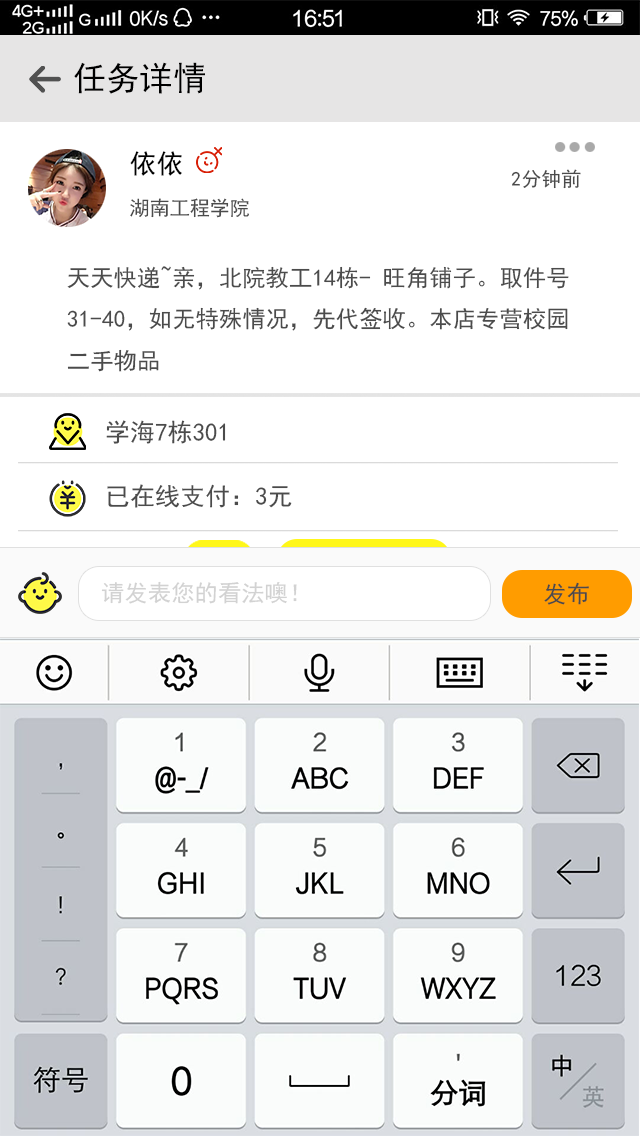
<style>
.page{position:relative;width:640px;height:1136px;background:#ffffff}
.page>*{position:absolute;margin:0}
.t1{font:33.3px "SimHei";letter-spacing:0.002em;color:#000000}
.t2{font:26.7px "SimHei";letter-spacing:0.002em;color:#010101}
.t3{font:12px "SimHei";letter-spacing:0.002em;color:#4b4b4b}
.t4{font:20px "SimHei";letter-spacing:0.002em;color:#4b4b4b}
.t5{font:23.3px/41.5px "SimHei";letter-spacing:0.002em;color:#4b4b4b}
.t6{font:25px "SimHei";letter-spacing:0.002em;color:#4b4b4b}
.t7{font:23.3px "SimHei";letter-spacing:0.002em;color:#d2d2d2}
.t8{font:23.3px "SimHei";letter-spacing:0.002em;color:#4b4b4b}
.t9{font:16.7px "SimHei";letter-spacing:0.002em}
</style>
<div class="page">
<p class="t1" style="left:74px;top:62px;width:131px;height:32px">任务详情</p>
<p class="t2" style="left:130px;top:151px;width:52px;height:25px">依依</p>
<p class="t3" style="left:511px;top:169px;width:70px;height:20px">2分钟前</p>
<p class="t4" style="left:130px;top:198px;width:119px;height:20px">湖南工程学院</p>
<p class="t5" style="left:67px;top:266px;width:502px;height:106px">天天快递~亲，北院教工14栋- 旺角铺子。取件号<br>31-40，如无特殊情况，先代签收。本店专营校园<br>二手物品</p>
<p class="t6" style="left:106px;top:420px;width:120px;height:24px">学海7栋301</p>
<p class="t6" style="left:107px;top:484px;width:185px;height:24px">已在线支付：3元</p>
<p class="t7" style="left:101px;top:581px;width:196px;height:23px">请发表您的看法噢！</p>
<p class="t8" style="left:544px;top:582px;width:45px;height:23px">发布</p>
<p class="t9" style="left:525px;top:687px;width:9px;height:12px">4</p>
</div>
